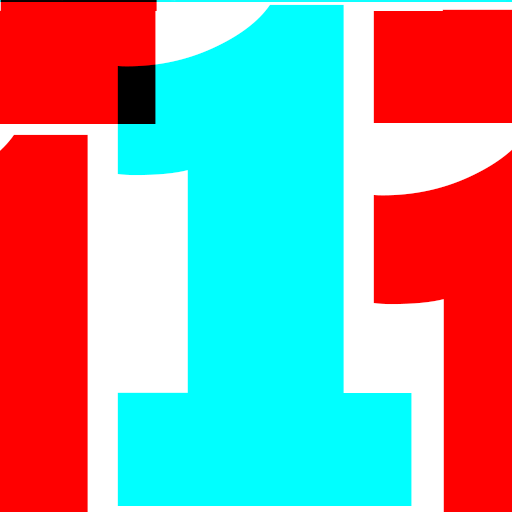
<style>
.page{position:relative;width:512px;height:512px;background:#00ffff}
.page>*{position:absolute;margin:0}
.t1{font:723px "Rockwell-ExtraBold";color:#00ffff}
</style>
<div class="page">
<p class="t1" style="left:117px;top:2px;width:295px;height:502px">1</p>
</div>
